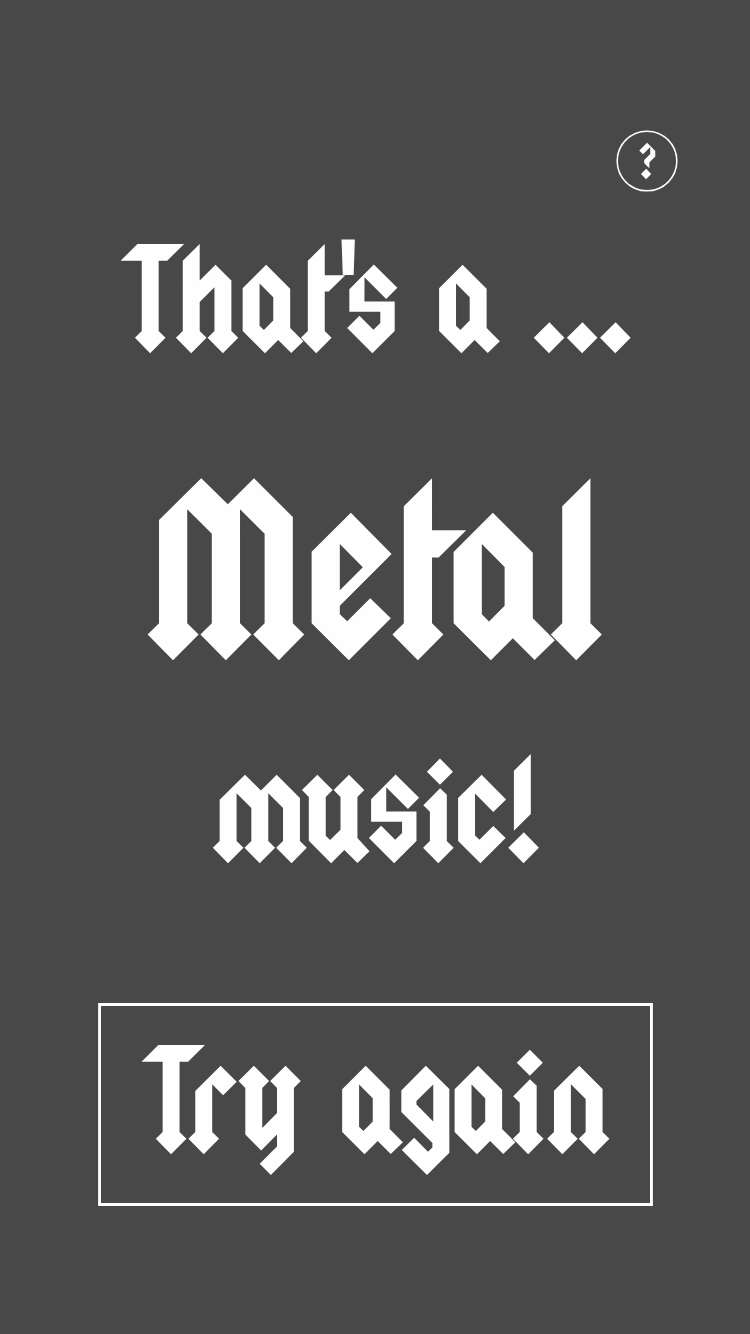
<style>
.page{position:relative;width:750px;height:1334px;background:#484848}
.page>*{position:absolute;margin:0}
.t1{font:40px "Squealer";color:#fffefe}
.t2{font:120px "Squealer";color:#fffefe}
.t3{font:200px "Squealer";color:#fffefe}
</style>
<div class="page">
<p class="t1" style="left:639px;top:142px;width:17px;height:38px">?</p>
<p class="t2" style="left:120px;top:239px;width:511px;height:115px">That's a ...</p>
<p class="t3" style="left:147px;top:478px;width:455px;height:183px">Metal</p>
<p class="t2" style="left:212px;top:753px;width:327px;height:111px">music!</p>
<p class="t2" style="left:141px;top:1044px;width:469px;height:132px">Try again</p>
</div>
